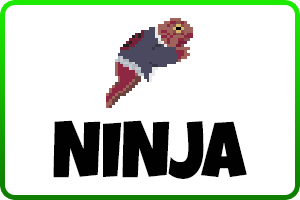
<style>
.page{position:relative;width:300px;height:200px;background:#ffffff}
.page>*{position:absolute;margin:0}
.t1{font:80.5px "LuckiestGuy-Regular";letter-spacing:-0.01em;color:#010101;text-transform:uppercase;scale:0.87 1}
</style>
<div class="page">
<p class="t1" style="left:53px;top:120px;width:194px;height:59px">ninja</p>
</div>
